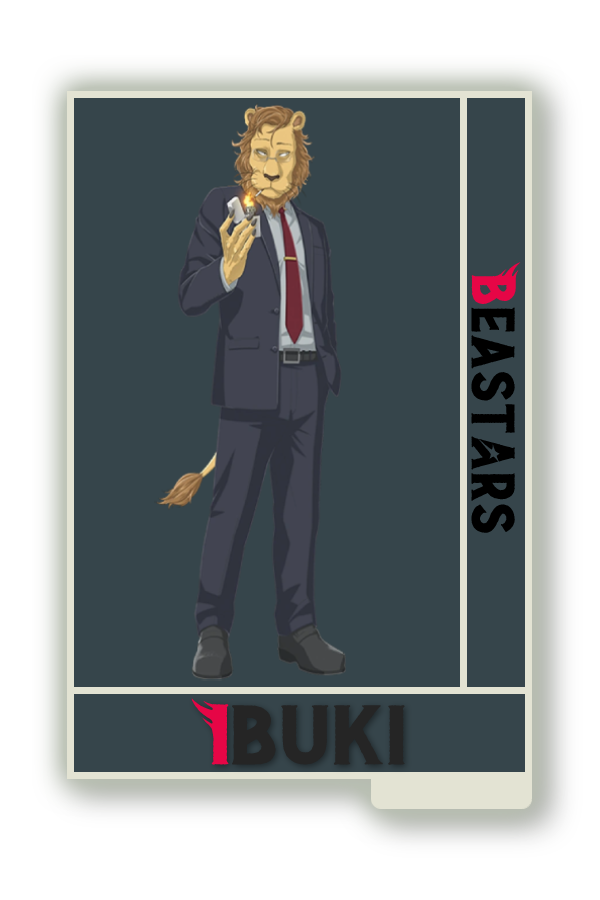
<style>
.page{position:relative;width:600px;height:900px;background:#36454b}
.page>*{position:absolute;margin:0}
.t1{font:48.8px "BEAST";color:#000000}
.t2{font:48.8px "BEAST";color:#e60646}
.t3{font:67px "BEAST";color:#252525;scale:1.12 1}
.t4{font:67px "BEAST";color:#e60646;scale:1.12 1}
</style>
<div class="page">
<p class="t1" style="left:471px;top:262px;width:50px;height:271px;rotate:90deg"><span class="t2">B</span>east@rs</p>
<p class="t3" style="left:191px;top:698px;width:214px;height:67px"><span class="t4">I</span>buki</p>
</div>
